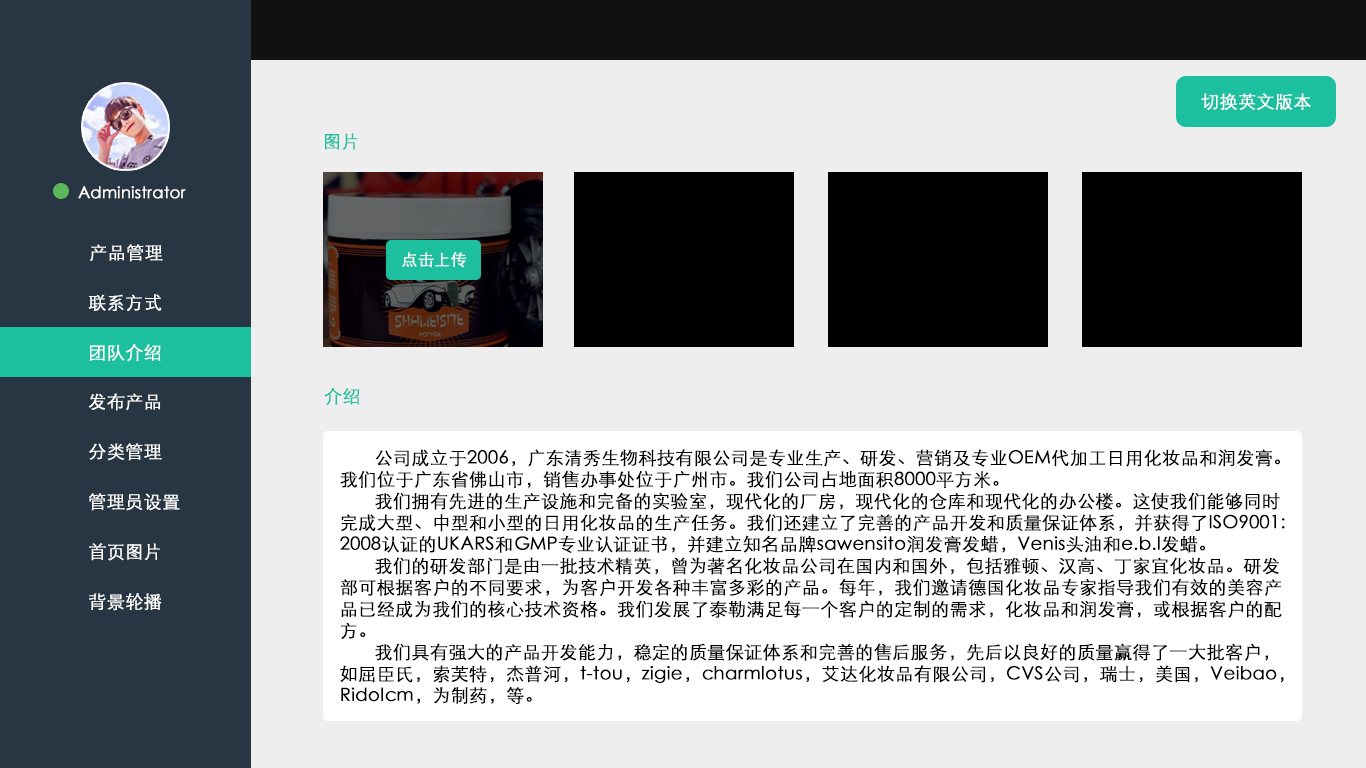
<style>
.page{position:relative;width:1366px;height:768px;background:#eeeeee}
.page>*{position:absolute;margin:0}
.t1{font:18px "STXihei";color:#ffffff;font-weight:bold}
.t2{font:18px "STXihei";color:#1cc09f;font-weight:bold}
.t3{font:16px "STXihei";color:#ffffff;font-weight:bold}
.t4{font:16px "STXihei";color:#fefefe;font-weight:bold}
.t5{font:18px "STXihei";color:#000000;font-weight:bold}
</style>
<div class="page">
<p class="t1" style="left:1201px;top:93px;width:110px;height:17px">切换英文版本</p>
<p class="t2" style="left:325px;top:133px;width:33px;height:17px">图片</p>
<p class="t3" style="left:78px;top:186px;width:108px;height:13px">Administrator</p>
<p class="t1" style="left:90px;top:244px;width:73px;height:18px">产品管理</p>
<p class="t4" style="left:402px;top:252px;width:65px;height:16px">点击上传</p>
<p class="t1" style="left:88px;top:294px;width:74px;height:17px">联系方式</p>
<p class="t1" style="left:89px;top:344px;width:72px;height:17px">团队介绍</p>
<p class="t2" style="left:324px;top:388px;width:36px;height:17px">介绍</p>
<p class="t1" style="left:88px;top:393px;width:73px;height:18px">发布产品</p>
<p class="t1" style="left:89px;top:443px;width:73px;height:18px">分类管理</p>
<p class="t5" style="left:340px;top:449px;width:945px;height:255px">公司成立于2006，广东清秀生物科技有限公司是专业生产、研发、营销及专业OEM代加工日用化妆品和润发膏。<br>我们位于广东省佛山市，销售办事处位于广州市。我们公司占地面积8000平方米。<br>       我们拥有先进的生产设施和完备的实验室，现代化的厂房，现代化的仓库和现代化的办公楼。这使我们能够同时<br>完成大型、中型和小型的日用化妆品的生产任务。我们还建立了完善的产品开发和质量保证体系，并获得了ISO9001:<br>2008认证的UKARS和GMP专业认证证书，并建立知名品牌sawensito润发膏发蜡，Venis头油和e.b.l发蜡。<br>       我们的研发部门是由一批技术精英，曾为著名化妆品公司在国内和国外，包括雅顿、汉高、丁家宜化妆品。研发<br>部可根据客户的不同要求，为客户开发各种丰富多彩的产品。每年，我们邀请德国化妆品专家指导我们有效的美容产<br>品已经成为我们的核心技术资格。我们发展了泰勒满足每一个客户的定制的需求，化妆品和润发膏，或根据客户的配<br>方。<br>       我们具有强大的产品开发能力，稳定的质量保证体系和完善的售后服务，先后以良好的质量赢得了一大批客户，<br>如屈臣氏，索芙特，杰普河，t-tou，zigie，charmlotus，艾达化妆品有限公司，CVS公司，瑞士，美国，Veibao，<br>Ridolcm，为制药，等。</p>
<p class="t1" style="left:89px;top:493px;width:91px;height:18px">管理员设置</p>
<p class="t1" style="left:89px;top:543px;width:71px;height:18px">首页图片</p>
<p class="t1" style="left:89px;top:593px;width:73px;height:18px">背景轮播</p>
</div>
